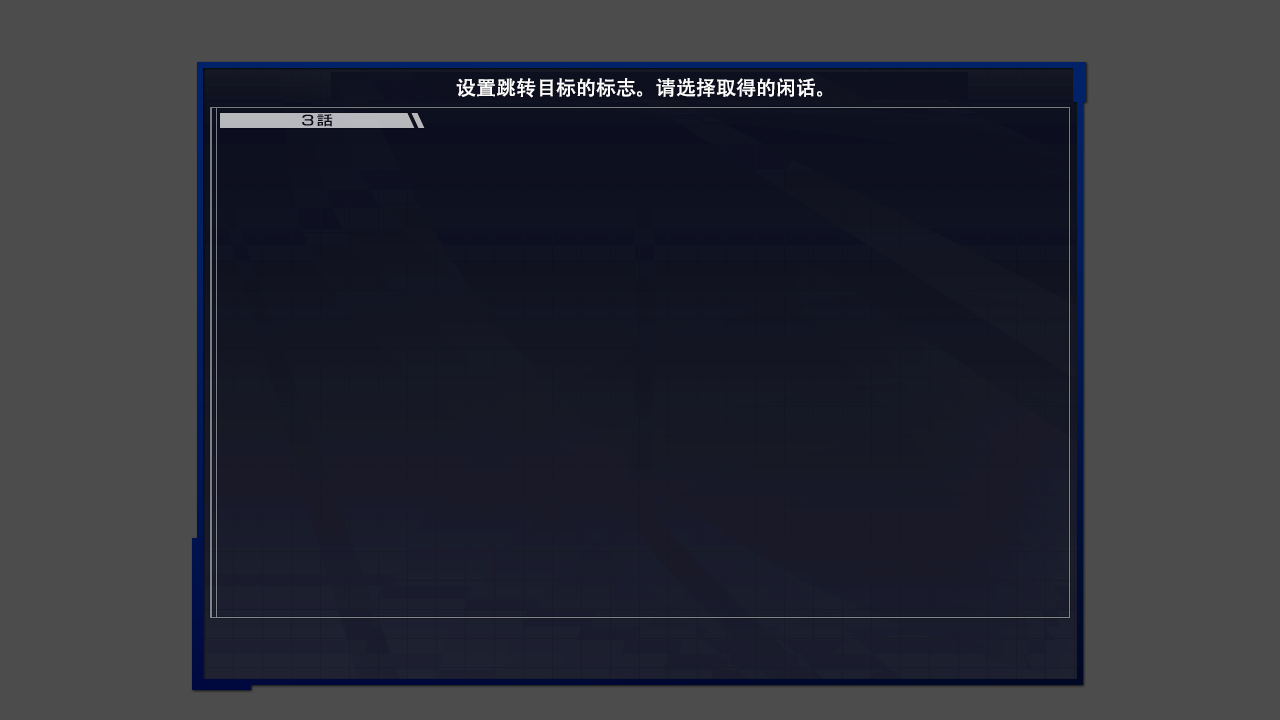
<style>
.page{position:relative;width:1280px;height:720px;background:#4c4c4c}
.page>*{position:absolute;margin:0}
.t1{font:20px "AdobeHeitiStd-Regular";color:#ffffff}
</style>
<div class="page">
<p class="t1" style="left:456px;top:78px;width:367px;height:20px">设置跳转目标的标志。请选择取得的闲话。</p>
</div>
